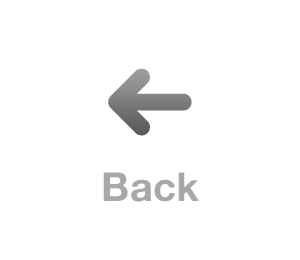
<style>
.page{position:relative;width:300px;height:260px;background:#ffffff}
.page>*{position:absolute;margin:0}
.t1{font:40px "AlteHaasGrotesk_Bold";color:#a8a8a8}
</style>
<div class="page">
<p class="t1" style="left:103px;top:172px;width:96px;height:30px">Back</p>
</div>
